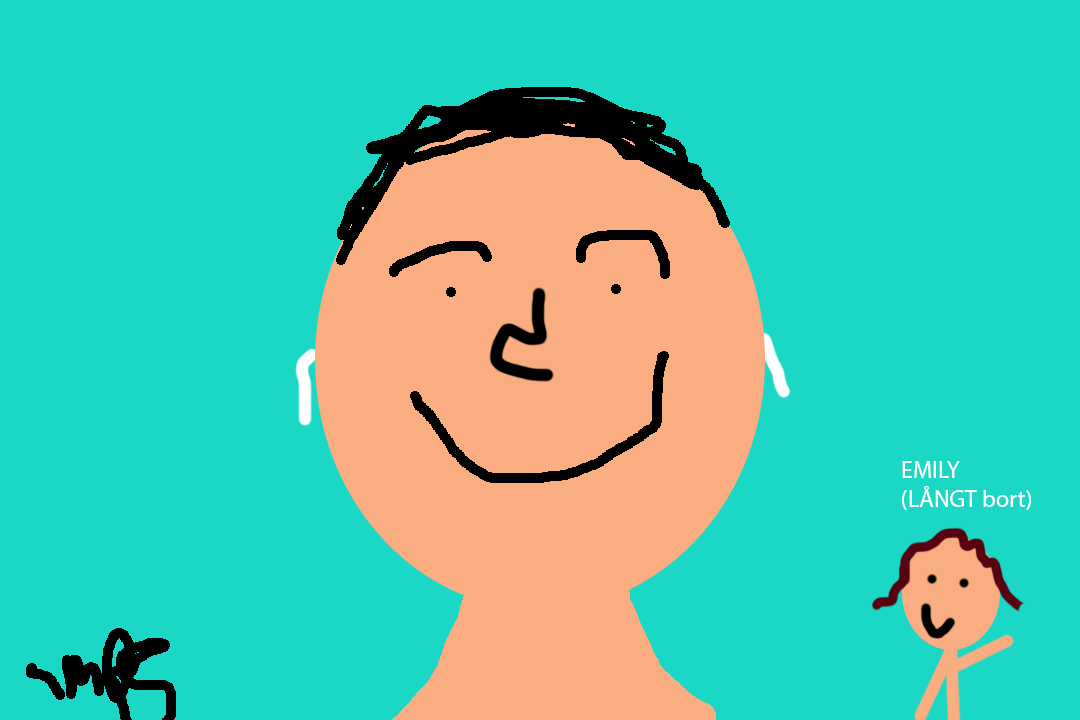
<style>
.page{position:relative;width:1080px;height:720px;background:#1bd8c6}
.page>*{position:absolute;margin:0}
.t1{font:24px "MyriadPro-Regular";color:#ffffff}
</style>
<div class="page">
<p class="t1" style="left:902px;top:461px;width:129px;height:49px">EMILY<br>(LÅNGT bort)</p>
</div>
